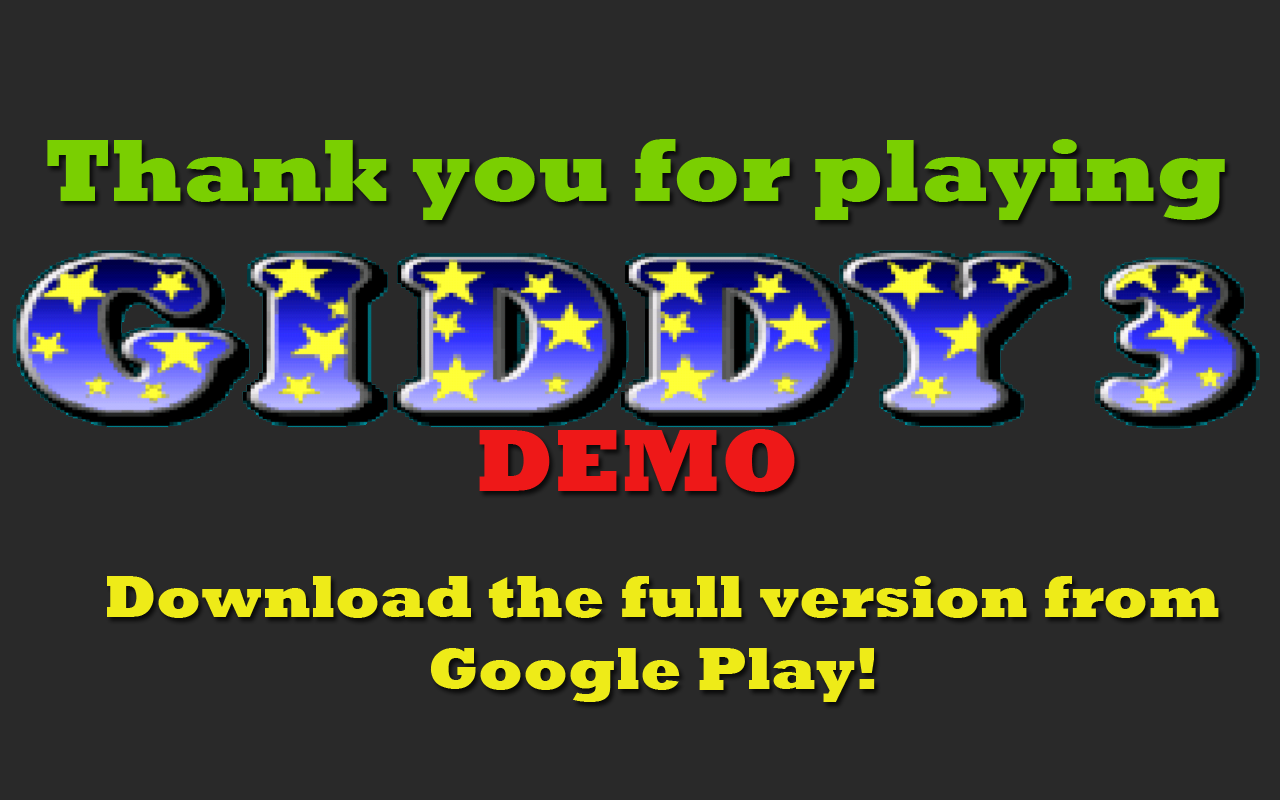
<style>
.page{position:relative;width:1280px;height:800px;background:#292929}
.page>*{position:absolute;margin:0}
.t1{font:90px "Rockwell-ExtraBold";color:#7acf01}
.t2{font:90px "Rockwell-ExtraBold";color:#ee1818}
.t3{font:60px "Rockwell-ExtraBold";color:#eeeb18}
</style>
<div class="page">
<p class="t1" style="left:47px;top:139px;width:1178px;height:81px">Thank you for playing</p>
<p class="t2" style="left:479px;top:429px;width:316px;height:63px">DEMO</p>
<p class="t3" style="left:107px;top:576px;width:1112px;height:126px">Download the full version from<br>         Google Play!</p>
</div>
